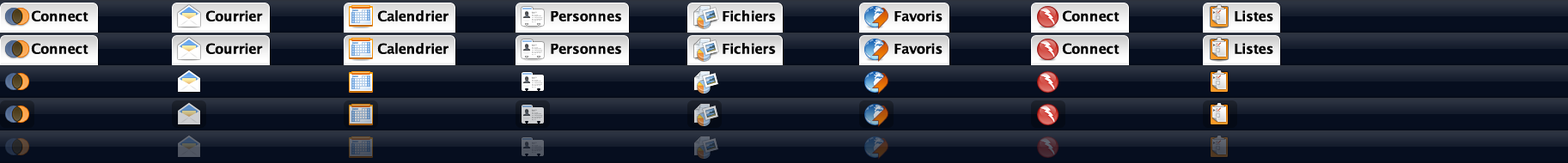
<style>
.page{position:relative;width:1568px;height:163px;background:#060e1f}
.page>*{position:absolute;margin:0}
.t1{font:13.7px "LucidaGrande-Bold";letter-spacing:-0.01em;color:#000000}
</style>
<div class="page">
<p class="t1" style="left:31px;top:10px;width:57px;height:11px">Connect</p>
<p class="t1" style="left:205px;top:10px;width:58px;height:11px">Courrier</p>
<p class="t1" style="left:377px;top:10px;width:71px;height:11px">Calendrier</p>
<p class="t1" style="left:551px;top:11px;width:70px;height:10px">Personnes</p>
<p class="t1" style="left:723px;top:10px;width:53px;height:11px">Fichiers</p>
<p class="t1" style="left:894px;top:10px;width:49px;height:11px">Favoris</p>
<p class="t1" style="left:1062px;top:10px;width:58px;height:11px">Connect</p>
<p class="t1" style="left:1235px;top:10px;width:38px;height:11px">Listes</p>
<p class="t1" style="left:31px;top:43px;width:57px;height:11px">Connect</p>
<p class="t1" style="left:205px;top:43px;width:58px;height:11px">Courrier</p>
<p class="t1" style="left:377px;top:43px;width:71px;height:11px">Calendrier</p>
<p class="t1" style="left:551px;top:44px;width:70px;height:10px">Personnes</p>
<p class="t1" style="left:723px;top:43px;width:53px;height:11px">Fichiers</p>
<p class="t1" style="left:894px;top:43px;width:49px;height:11px">Favoris</p>
<p class="t1" style="left:1062px;top:43px;width:58px;height:11px">Connect</p>
<p class="t1" style="left:1235px;top:43px;width:38px;height:11px">Listes</p>
</div>
